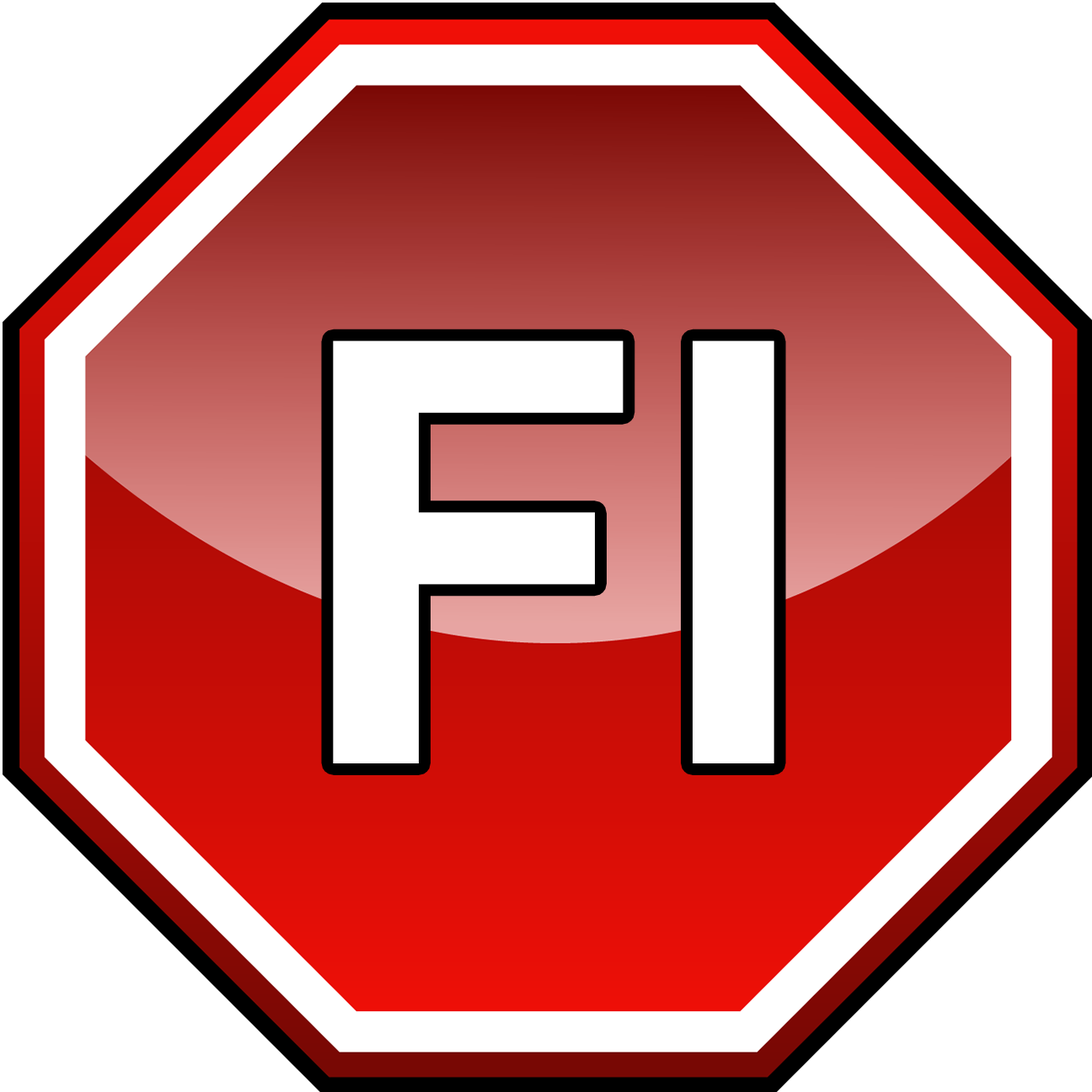
<style>
.page{position:relative;width:1092px;height:1092px;background:#ffffff}
.page>*{position:absolute;margin:0}
.t1{font:589.8px "Arial-BoldMT";color:#ffffff}
</style>
<div class="page">
<p class="t1" style="left:333px;top:340px;width:441px;height:423px">Fl</p>
</div>
